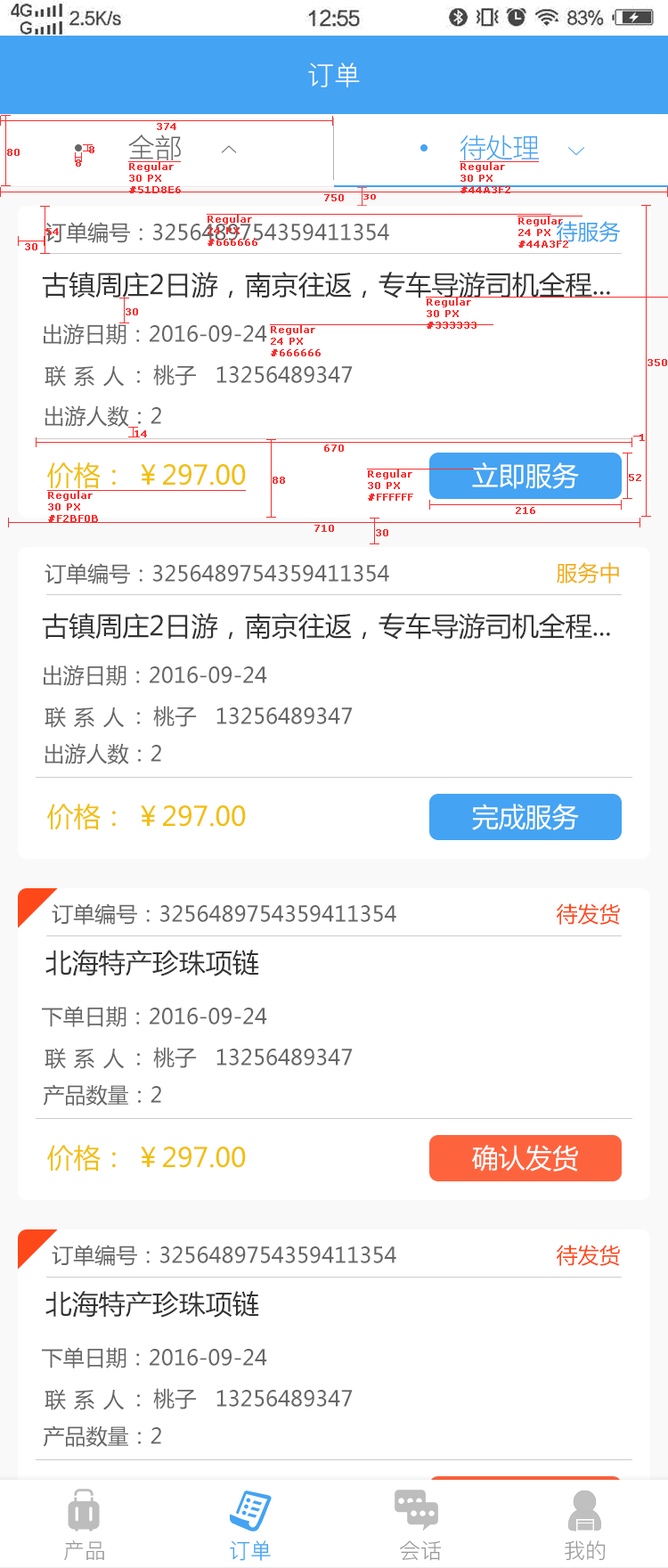
<style>
.page{position:relative;width:668px;height:1568px;background:#ffffff}
.page>*{position:absolute;margin:0}
.t1{font:26.7px "PingFang-SC-Regular";color:#ffffff;text-transform:uppercase}
.t2{font:9.8px "Verdana";color:#f83030;font-weight:bold}
.t3{font:26.7px "MicrosoftYaHeiLight";color:#666666}
.t4{font:26.7px "MicrosoftYaHeiLight";color:#44a3f2}
.t5{font:6.9px "Verdana";color:#f83030;font-weight:bold;scale:1.43 1}
.t6{font:21.4px "MicrosoftYaHei";color:#666666}
.t7{font:21.4px "MicrosoftYaHei";color:#44a3f2}
.t8{font:26.7px "MicrosoftYaHei";color:#333333}
.t9{font:21.4px "MicrosoftYaHei";letter-spacing:0.36em;color:#666666}
.t10{font:26.7px "MicrosoftYaHei";color:#f2bf0b}
.t11{font:26.7px "MicrosoftYaHei";color:#ffffff}
.t12{font:21.4px "MicrosoftYaHei";color:#f2ad10}
.t13{font:21.4px "MicrosoftYaHei";color:#ff481a}
.t14{font:21.4px "PingFang-SC-Regular";color:#999999;text-transform:uppercase}
.t15{font:21.4px "PingFang-SC-Regular";color:#44a3f2;text-transform:uppercase}
</style>
<div class="page">
<p class="t1" style="left:308px;top:62px;width:52px;height:25px">订单</p>
<p class="t2" style="left:157px;top:123px;width:19px;height:7px">374</p>
<p class="t3" style="left:128px;top:135px;width:53px;height:25px">全部</p>
<p class="t4" style="left:460px;top:135px;width:79px;height:25px">待处理</p>
<p class="t2" style="left:7px;top:149px;width:13px;height:7px">80</p>
<p class="t2" style="left:89px;top:146px;width:5px;height:7px">8</p>
<p class="t2" style="left:76px;top:159px;width:5px;height:8px">8</p>
<p class="t2" style="left:129px;top:162px;width:52px;height:31px">Regular<br>30 PX<br>#51D8E6</p>
<p class="t2" style="left:461px;top:162px;width:49px;height:31px">Regular<br>30 PX<br>#44A3F2</p>
<p class="t2" style="left:324px;top:194px;width:20px;height:7px">750</p>
<p class="t5" style="left:363px;top:194px;width:13px;height:6px">30</p>
<p class="t6" style="left:45px;top:222px;width:344px;height:21px">订单编号：3256489754359411354</p>
<p class="t2" style="left:208px;top:215px;width:49px;height:31px">Regular<br>24 PX<br>#666666</p>
<p class="t2" style="left:519px;top:216px;width:49px;height:32px">Regular<br>24 PX<br>#44A3F2</p>
<p class="t7" style="left:556px;top:221px;width:65px;height:21px">待服务</p>
<p class="t2" style="left:46px;top:228px;width:13px;height:7px">54</p>
<p class="t2" style="left:25px;top:243px;width:12px;height:7px">30</p>
<p class="t8" style="left:42px;top:272px;width:568px;height:26px">古镇周庄2日游，南京往返，专车导游司机全程...</p>
<p class="t2" style="left:427px;top:298px;width:50px;height:31px">Regular<br>30 PX<br>#333333</p>
<p class="t2" style="left:126px;top:308px;width:12px;height:7px">30</p>
<p class="t6" style="left:44px;top:323px;width:223px;height:22px">出游日期：2016-09-24</p>
<p class="t2" style="left:271px;top:325px;width:50px;height:31px">Regular<br>24 PX<br>#666666</p>
<p class="t9" style="left:45px;top:365px;width:80px;height:22px">联系人</p>
<p class="t6" style="left:137px;top:364px;width:216px;height:22px">:  桃子   13256489347</p>
<p class="t2" style="left:648px;top:359px;width:19px;height:7px">350</p>
<p class="t6" style="left:45px;top:405px;width:116px;height:22px">出游人数：2</p>
<p class="t2" style="left:135px;top:430px;width:12px;height:7px">14</p>
<p class="t2" style="left:640px;top:434px;width:5px;height:7px">1</p>
<p class="t2" style="left:324px;top:445px;width:20px;height:7px">670</p>
<p class="t10" style="left:47px;top:462px;width:199px;height:27px">价格： ￥297.00</p>
<p class="t2" style="left:368px;top:470px;width:45px;height:31px">Regular<br>30 PX<br>#FFFFFF</p>
<p class="t11" style="left:472px;top:462px;width:107px;height:27px">立即服务</p>
<p class="t2" style="left:629px;top:474px;width:12px;height:7px">52</p>
<p class="t2" style="left:273px;top:477px;width:12px;height:7px">88</p>
<p class="t2" style="left:48px;top:491px;width:50px;height:31px">Regular<br>30 PX<br>#F2BF0B</p>
<p class="t2" style="left:516px;top:507px;width:19px;height:7px">216</p>
<p class="t2" style="left:314px;top:525px;width:20px;height:7px">710</p>
<p class="t2" style="left:376px;top:529px;width:12px;height:7px">30</p>
<p class="t6" style="left:45px;top:563px;width:344px;height:21px">订单编号：3256489754359411354</p>
<p class="t12" style="left:557px;top:562px;width:62px;height:22px">服务中</p>
<p class="t8" style="left:42px;top:613px;width:568px;height:27px">古镇周庄2日游，南京往返，专车导游司机全程...</p>
<p class="t6" style="left:44px;top:665px;width:223px;height:21px">出游日期：2016-09-24</p>
<p class="t9" style="left:45px;top:706px;width:80px;height:22px">联系人</p>
<p class="t6" style="left:137px;top:706px;width:216px;height:21px">:  桃子   13256489347</p>
<p class="t6" style="left:45px;top:743px;width:116px;height:21px">出游人数：2</p>
<p class="t10" style="left:47px;top:804px;width:199px;height:26px">价格： ￥297.00</p>
<p class="t11" style="left:472px;top:804px;width:107px;height:26px">完成服务</p>
<p class="t6" style="left:52px;top:903px;width:344px;height:22px">订单编号：3256489754359411354</p>
<p class="t13" style="left:556px;top:903px;width:64px;height:22px">待发货</p>
<p class="t8" style="left:45px;top:950px;width:214px;height:26px">北海特产珍珠项链</p>
<p class="t6" style="left:42px;top:1006px;width:225px;height:21px">下单日期：2016-09-24</p>
<p class="t9" style="left:45px;top:1048px;width:80px;height:21px">联系人</p>
<p class="t6" style="left:137px;top:1047px;width:216px;height:21px">:  桃子   13256489347</p>
<p class="t6" style="left:43px;top:1084px;width:118px;height:22px">产品数量：2</p>
<p class="t10" style="left:47px;top:1145px;width:199px;height:27px">价格： ￥297.00</p>
<p class="t11" style="left:472px;top:1145px;width:106px;height:27px">确认发货</p>
<p class="t6" style="left:52px;top:1245px;width:344px;height:21px">订单编号：3256489754359411354</p>
<p class="t13" style="left:556px;top:1245px;width:64px;height:21px">待发货</p>
<p class="t8" style="left:45px;top:1291px;width:214px;height:27px">北海特产珍珠项链</p>
<p class="t6" style="left:42px;top:1347px;width:225px;height:21px">下单日期：2016-09-24</p>
<p class="t9" style="left:45px;top:1389px;width:80px;height:21px">联系人</p>
<p class="t6" style="left:137px;top:1388px;width:216px;height:21px">:  桃子   13256489347</p>
<p class="t6" style="left:43px;top:1425px;width:118px;height:22px">产品数量：2</p>
<p class="t14" style="left:64px;top:1540px;width:40px;height:21px">产品</p>
<p class="t15" style="left:230px;top:1540px;width:41px;height:21px">订单</p>
<p class="t14" style="left:400px;top:1540px;width:41px;height:21px">会话</p>
<p class="t14" style="left:565px;top:1540px;width:41px;height:21px">我的</p>
</div>
